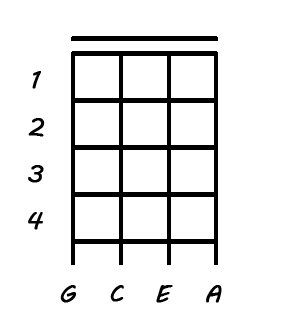
<style>
.page{position:relative;width:282px;height:325px;background:#ffffff}
.page>*{position:absolute;margin:0}
.t1{font:24px "MVBoli";color:#000000;font-weight:bold}
</style>
<div class="page">
<p class="t1" style="left:32px;top:71px;width:9px;height:18px">1</p>
<p class="t1" style="left:28px;top:118px;width:17px;height:19px">2</p>
<p class="t1" style="left:28px;top:165px;width:16px;height:18px">3</p>
<p class="t1" style="left:28px;top:212px;width:15px;height:18px">4</p>
<p class="t1" style="left:60px;top:285px;width:16px;height:18px">G</p>
<p class="t1" style="left:110px;top:285px;width:14px;height:17px">C</p>
<p class="t1" style="left:156px;top:285px;width:17px;height:18px">E</p>
<p class="t1" style="left:206px;top:285px;width:16px;height:18px">A</p>
</div>
